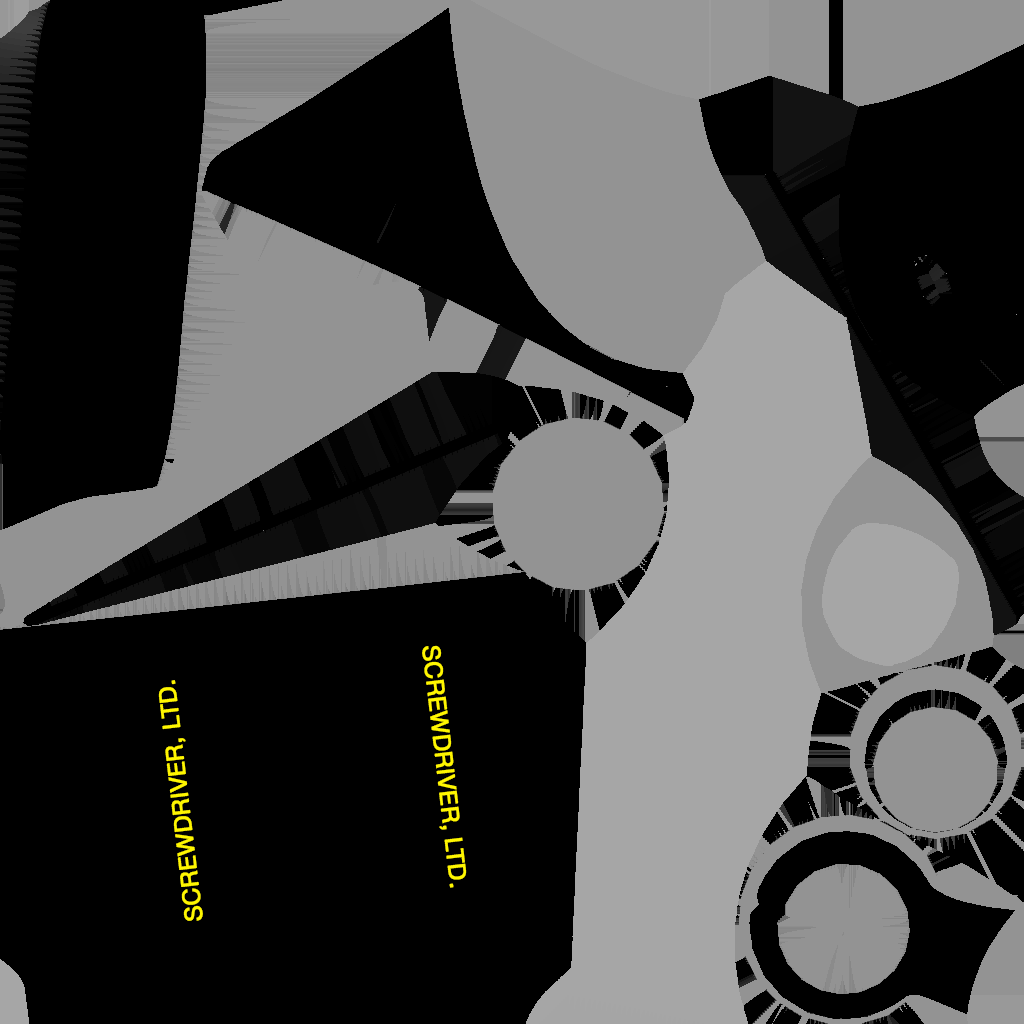
<style>
.page{position:relative;width:1024px;height:1024px;background:#000000}
.page>*{position:absolute;margin:0}
.t1{font:24px "HelveticaNeue";color:#fff600;font-weight:bold}
</style>
<div class="page">
<p class="t1" style="left:422px;top:645px;width:45px;height:243px;rotate:83deg">SCREWDRIVER, LTD.</p>
<p class="t1" style="left:158px;top:680px;width:45px;height:241px;rotate:-97deg">SCREWDRIVER, LTD.</p>
</div>
